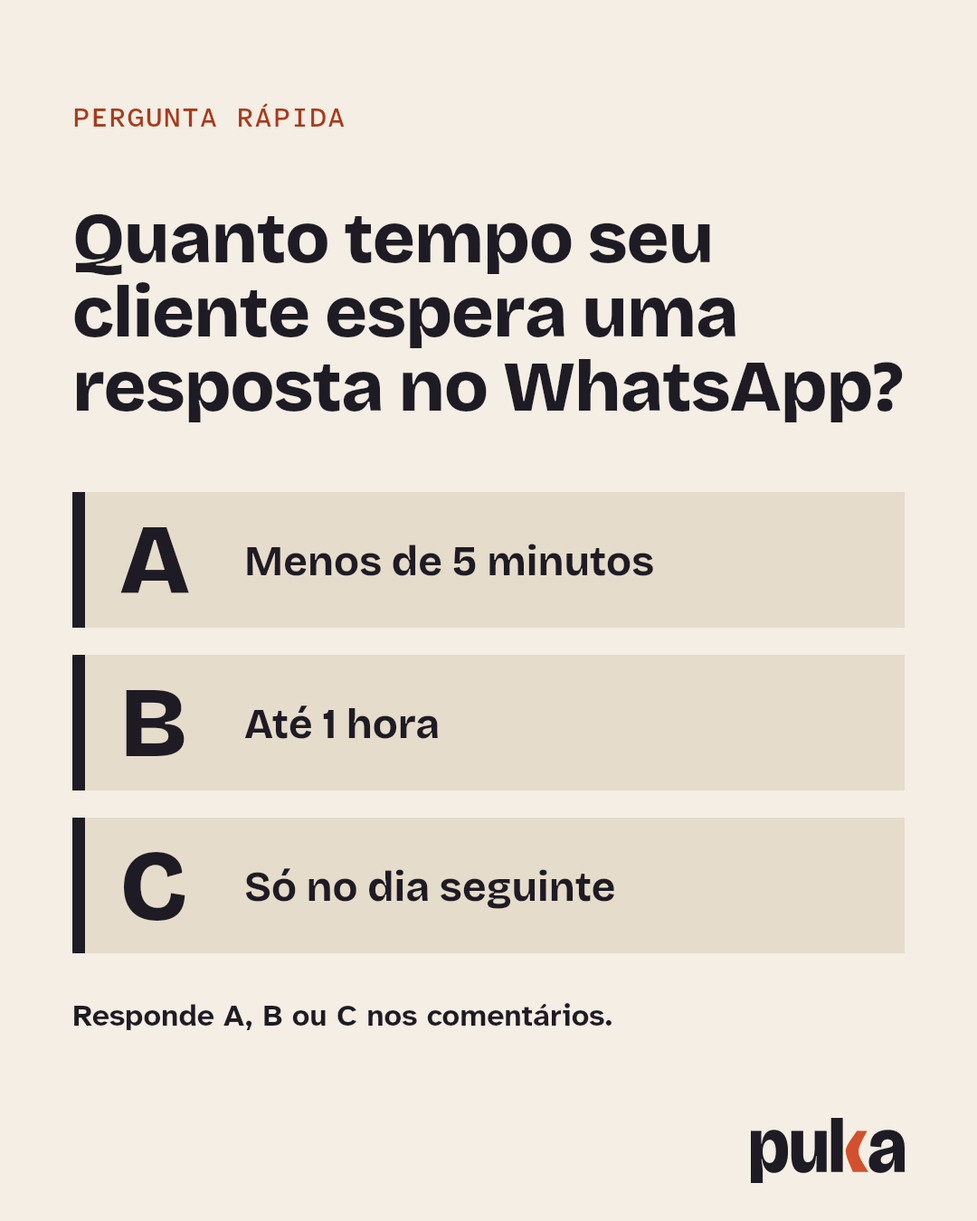
<style>
.page{position:relative;width:977px;height:1221px;background:#f4eee4}
.page>*{position:absolute;margin:0}
.t1{font:27.1px "AtkinsonHyperlegibleMono-Medium";letter-spacing:0.04em;color:#a83a1c}
.t2{font:72.3px/74.2px "BricolageGrotesque-ExtraBold";letter-spacing:-0.012em;color:#1e1b24}
.t3{font:99.5px "BricolageGrotesque-ExtraBold";letter-spacing:-0.012em;color:#1e1b24}
.t4{font:41.6px "BricolageGrotesque-Bold";color:#1e1b24}
.t5{font:30.7px "AtkinsonHyperlegibleNext-Bold";color:#1e1b24}
</style>
<div class="page">
<p class="t1" style="left:74px;top:103px;width:271px;height:24px">PERGUNTA RÁPIDA</p>
<p class="t2" style="left:74px;top:213px;width:829px;height:209px">Quanto tempo seu<br>cliente espera uma<br>resposta no WhatsApp?</p>
<p class="t3" style="left:120px;top:527px;width:69px;height:66px">A</p>
<p class="t4" style="left:247px;top:544px;width:406px;height:32px">Menos de 5 minutos</p>
<p class="t3" style="left:126px;top:690px;width:58px;height:66px">B</p>
<p class="t4" style="left:244px;top:705px;width:194px;height:34px">Até 1 hora</p>
<p class="t3" style="left:123px;top:852px;width:62px;height:69px">C</p>
<p class="t4" style="left:246px;top:868px;width:368px;height:41px">Só no dia seguinte</p>
<p class="t5" style="left:74px;top:1003px;width:537px;height:27px">Responde A, B ou C nos comentários.</p>
</div>
